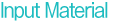
<style>
.page{position:relative;width:129px;height:21px;background:#ffffff}
.page>*{position:absolute;margin:0}
.t1{font:20px "GothicMB101Pro-Regular";letter-spacing:-0.06em;color:#1dbcc0;scale:0.9 1}
</style>
<div class="page">
<p class="t1" style="left:1px;top:2px;width:107px;height:19px">Input Material</p>
</div>
